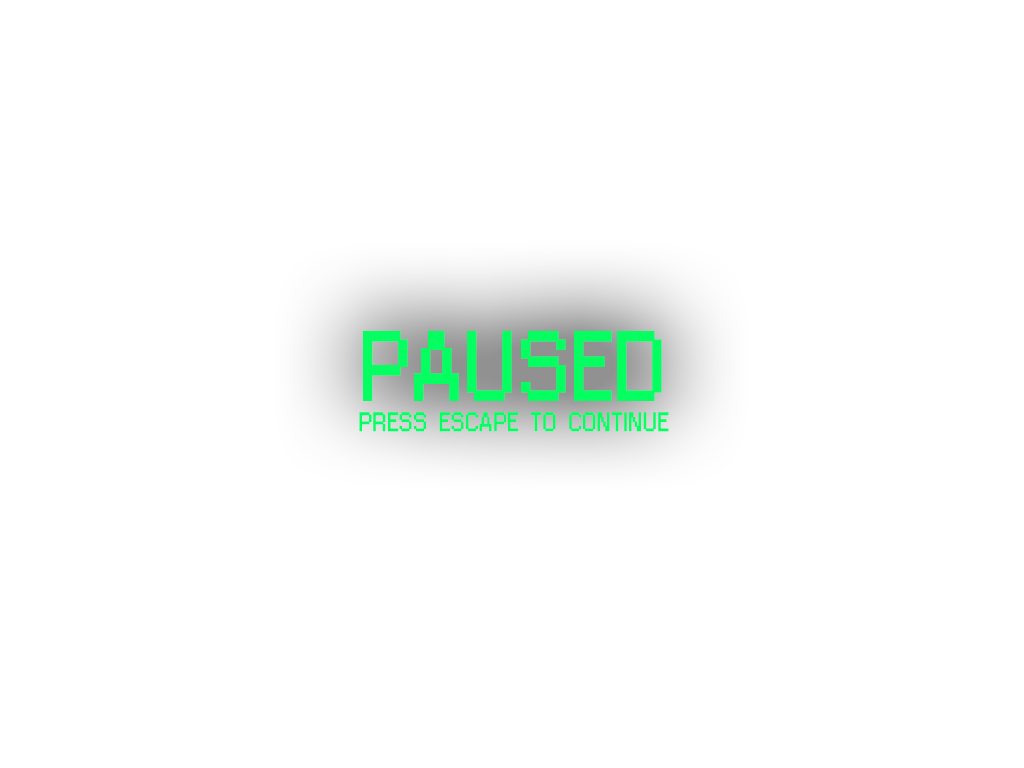
<style>
.page{position:relative;width:1024px;height:768px;background:#ffffff}
.page>*{position:absolute;margin:0}
.t1{font:85px "Jixellation";color:#05ff61}
.t2{font:23px "Jixellation";color:#05ff61}
</style>
<div class="page">
<p class="t1" style="left:363px;top:331px;width:299px;height:70px">PAUSED</p>
<p class="t2" style="left:359px;top:412px;width:310px;height:20px">PRESS ESCAPE TO CONTINUE</p>
</div>
